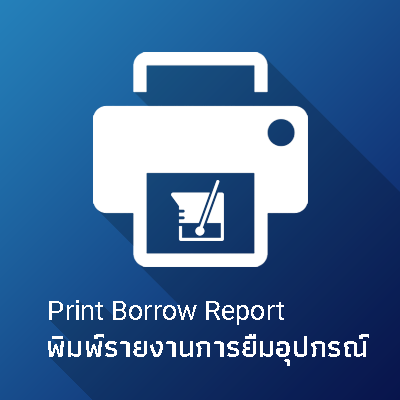
<style>
.page{position:relative;width:400px;height:400px}
.page>*{position:absolute;margin:0}
.t1{font:26.5px "Roboto-Regular";letter-spacing:0.01em;color:#ffffff}
.t2{font:30px "Athiti-SemiBold";letter-spacing:0.01em;color:#ffffff}
</style>
<div class="page">
<p class="t1" style="left:49px;top:300px;width:235px;height:25px">Print Borrow Report</p>
<p class="t2" style="left:48px;top:334px;width:321px;height:32px">พิมพ์รายงานการยืมอุปกรณ์</p>
</div>
